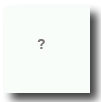
<style>
.page{position:relative;width:101px;height:102px;background:#f8fdfa}
.page>*{position:absolute;margin:0}
.t1{font:14px "Helvetica-Bold";letter-spacing:0.075em;color:#7d7676}
</style>
<div class="page">
<p class="t1" style="left:37px;top:39px;width:8px;height:10px">?</p>
</div>
